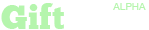
<style>
.page{position:relative;width:149px;height:30px;background:#ffffff}
.page>*{position:absolute;margin:0}
.t1{font:34px "ChunkFive";color:#b5f5ad}
.t2{font:34px "ChunkFive";color:#ffffff}
.t3{font:10px "HelveticaNeue";color:#b5f5ad}
</style>
<div class="page">
<p class="t1" style="left:1px;top:3px;width:146px;height:26px">Gift<span class="t2">Flow</span></p>
<p class="t3" style="left:113px;top:3px;width:33px;height:7px">ALPHA</p>
</div>
